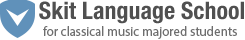
<style>
.page{position:relative;width:245px;height:40px;background:#ffffff}
.page>*{position:absolute;margin:0}
.t1{font:24px "HelveticaNeue-CondensedBold";color:#666666}
.t2{font:13px "MyriadPro-Regular";color:#6e6e6e}
</style>
<div class="page">
<p class="t1" style="left:39px;top:1px;width:205px;height:23px">Skit Language School</p>
<p class="t2" style="left:43px;top:26px;width:194px;height:13px">for classical music majored students</p>
</div>
